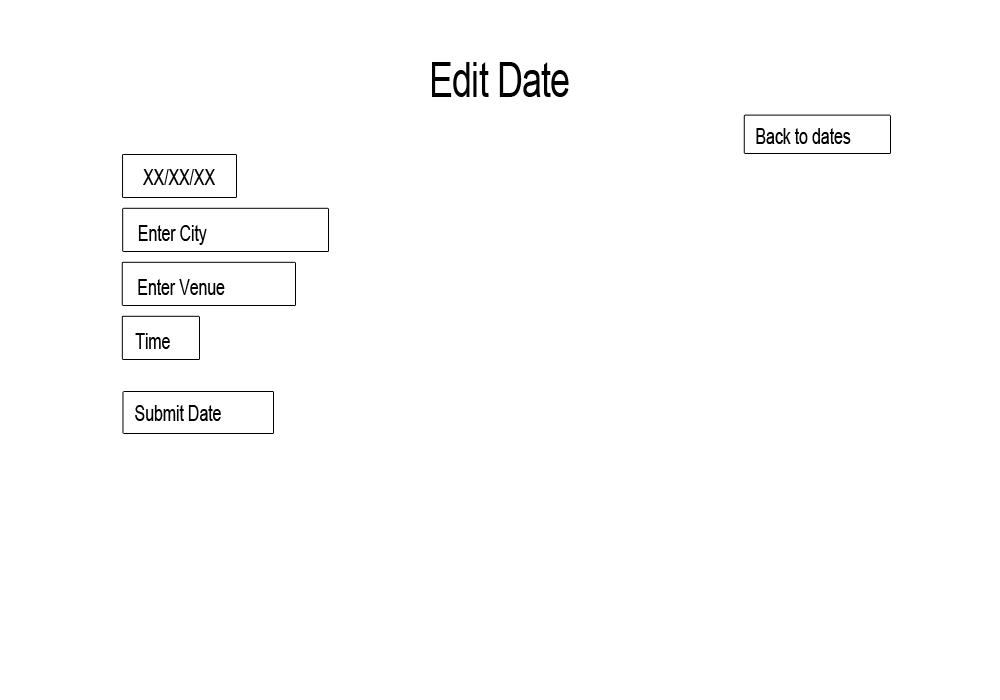
<style>
.page{position:relative;width:1000px;height:700px;background:#ffffff}
.page>*{position:absolute;margin:0}
.t1{font:48.7px "ArialMT";letter-spacing:-0.02em;color:#000000;scale:0.73 1}
.t2{font:22.3px "ArialMT";letter-spacing:-0.02em;color:#000000;scale:0.73 1}
</style>
<div class="page">
<p class="t1" style="left:432px;top:62px;width:137px;height:35px">Edit Date</p>
<p class="t2" style="left:756px;top:128px;width:95px;height:16px">Back to dates</p>
<p class="t2" style="left:143px;top:169px;width:72px;height:16px">XX/XX/XX</p>
<p class="t2" style="left:138px;top:225px;width:69px;height:20px">Enter City</p>
<p class="t2" style="left:138px;top:279px;width:87px;height:16px">Enter Venue</p>
<p class="t2" style="left:135px;top:333px;width:35px;height:16px">Time</p>
<p class="t2" style="left:135px;top:405px;width:86px;height:16px">Submit Date</p>
</div>
